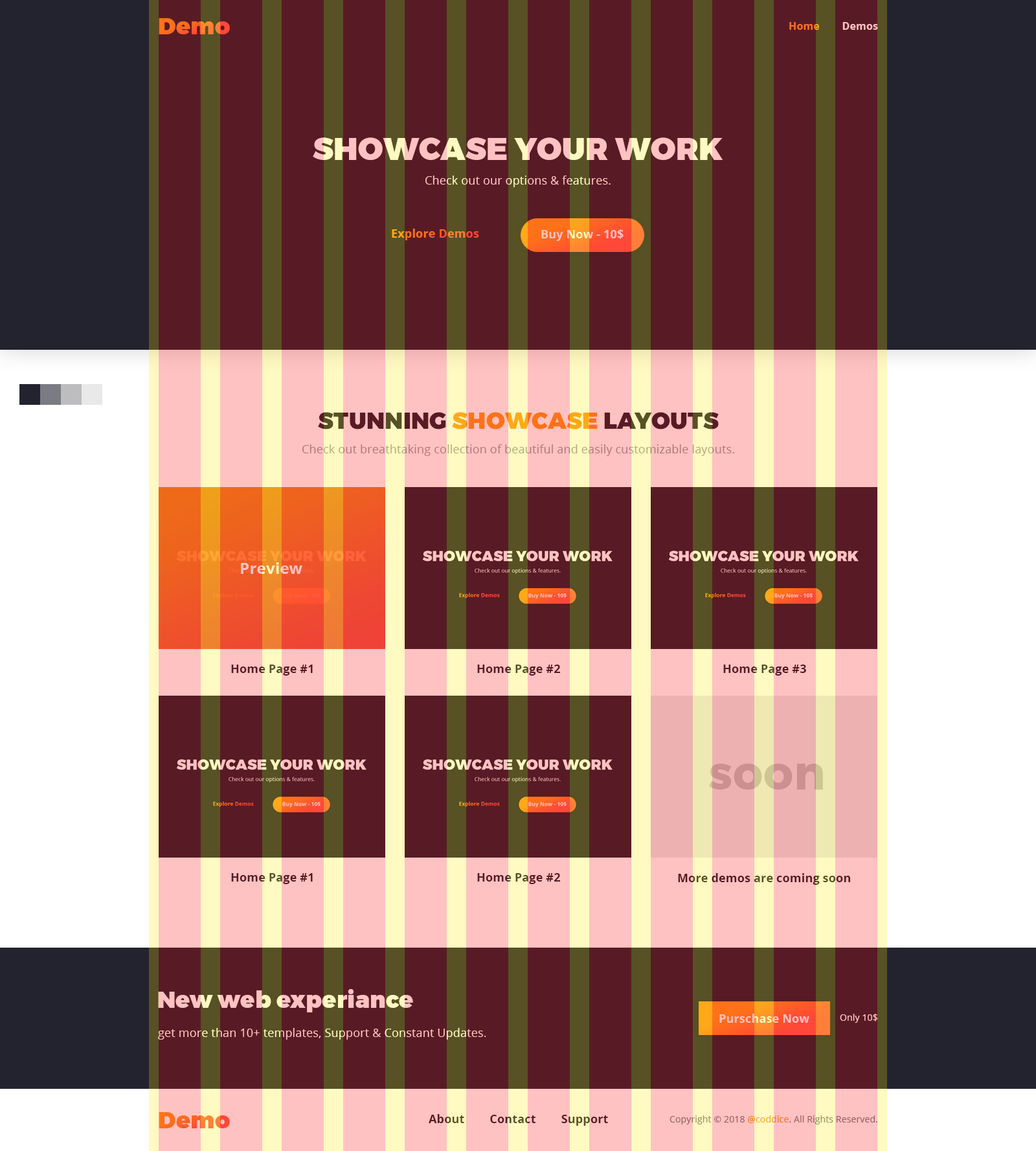
<style>
.page{position:relative;width:1036px;height:1151px;background:#581b25}
.page>*{position:absolute;margin:0}
.t1{font:23.3px "Montserrat-Black";letter-spacing:0.01em}
.t2{font:10.4px "OpenSans-Bold";letter-spacing:0.01em}
.t3{font:31.1px "Montserrat-Black";letter-spacing:0.01em;text-transform:uppercase}
.t4{font:11.7px "OpenSans-Regular";letter-spacing:0.01em}
.t5{font:11.7px "OpenSans-Bold";letter-spacing:0.01em}
.t6{font:11.7px "OpenSans-Bold";letter-spacing:0.01em;color:#ffc2c2}
.t7{font:23.3px "Montserrat-Black";letter-spacing:0.01em;text-transform:uppercase}
.t8{font:15.5px "OpenSans-Bold";letter-spacing:0.01em;color:#ffc2c2}
.t9{font:11.7px "OpenSans-Bold";letter-spacing:0.01em;color:#581b25}
.t10{font:46.6px "Montserrat-Bold";letter-spacing:0.01em;color:#cd9092}
.t11{font:23.3px "Montserrat-Black";letter-spacing:0.01em;color:#ffc2c2}
.t12{font:9.1px "OpenSans-Regular";letter-spacing:0.01em;color:#ffc2c2}
.t13{font:9.1px "OpenSans-Regular";letter-spacing:0.01em}
</style>
<div class="page">
<p class="t1" style="left:159px;top:18px;width:71px;height:16px">Demo</p>
<p class="t2" style="left:789px;top:22px;width:89px;height:8px">Home        Demos</p>
<p class="t3" style="left:313px;top:137px;width:410px;height:23px">Showcase your work</p>
<p class="t4" style="left:425px;top:176px;width:186px;height:11px">Check out our options &amp; features.</p>
<p class="t5" style="left:392px;top:229px;width:87px;height:11px">Explore Demos</p>
<p class="t6" style="left:541px;top:229px;width:83px;height:12px">Buy Now - 10$</p>
<p class="t7" style="left:318px;top:412px;width:401px;height:17px">Stunning Showcase Layouts</p>
<p class="t4" style="left:302px;top:444px;width:432px;height:12px">Check out breathtaking collection of beautiful and easily customizable layouts.</p>
<p class="t8" style="left:241px;top:562px;width:61px;height:12px">Preview</p>
<p class="t9" style="left:231px;top:664px;width:82px;height:11px">Home Page #1</p>
<p class="t9" style="left:477px;top:664px;width:83px;height:11px">Home Page #2</p>
<p class="t9" style="left:723px;top:664px;width:83px;height:11px">Home Page #3</p>
<p class="t10" style="left:709px;top:764px;width:114px;height:25px">soon</p>
<p class="t9" style="left:231px;top:873px;width:82px;height:11px">Home Page #1</p>
<p class="t9" style="left:477px;top:873px;width:83px;height:11px">Home Page #2</p>
<p class="t5" style="left:678px;top:873px;width:172px;height:12px">More demos are coming soon</p>
<p class="t11" style="left:158px;top:989px;width:255px;height:23px">New web experiance</p>
<p class="t6" style="left:719px;top:1014px;width:91px;height:9px">Purschase Now</p>
<p class="t12" style="left:840px;top:1014px;width:38px;height:9px">Only 10$</p>
<p class="t4" style="left:158px;top:1028px;width:328px;height:11px">get more than 10+ templates, Support &amp; Constant Updates.</p>
<p class="t1" style="left:159px;top:1112px;width:71px;height:16px">Demo</p>
<p class="t5" style="left:429px;top:1114px;width:179px;height:12px">About        Contact        Support</p>
<p class="t13" style="left:670px;top:1115px;width:208px;height:9px">Copyright © 2018 @coddice. All Rights Reserved.</p>
</div>
